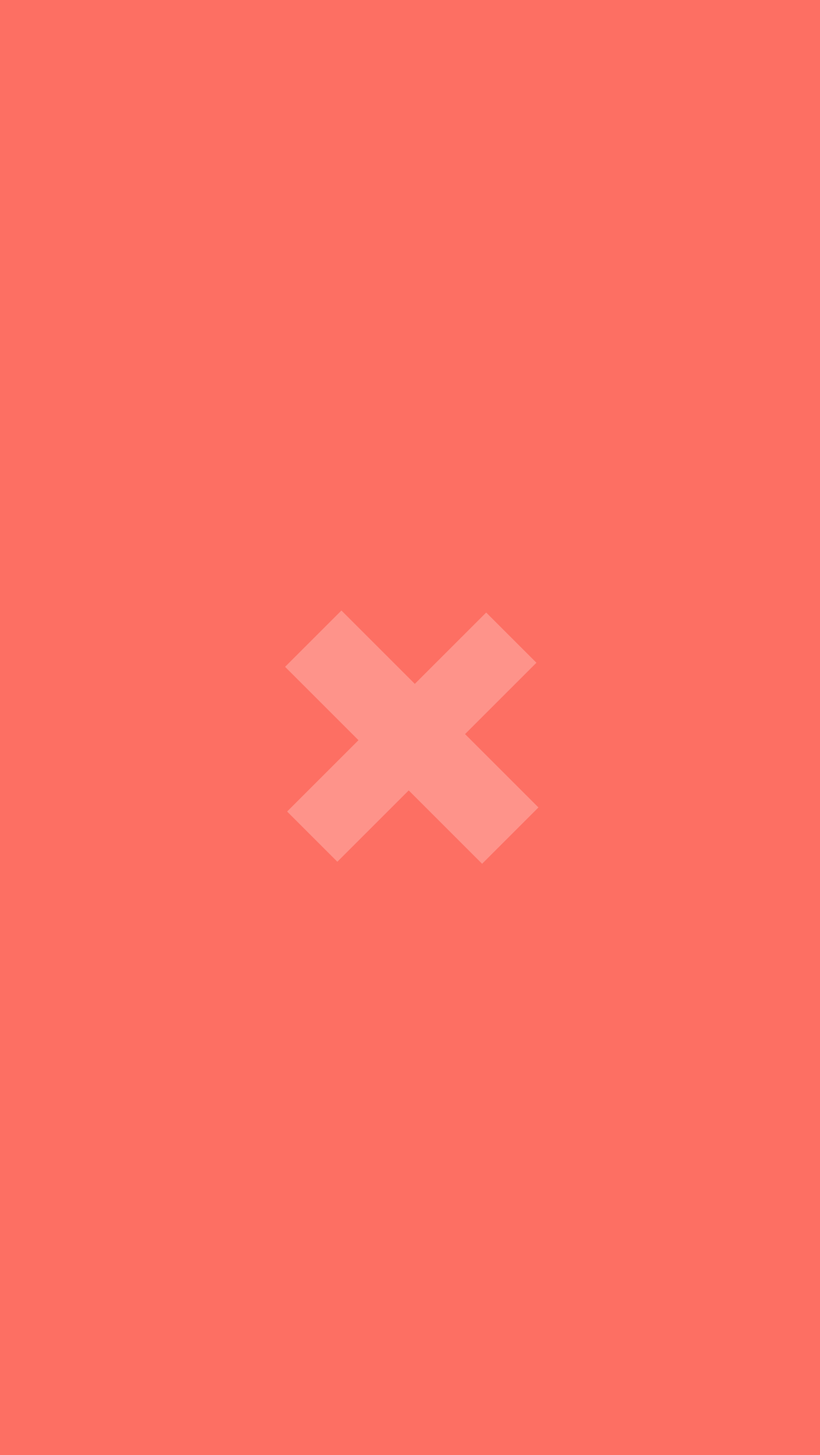
<style>
.page{position:relative;width:820px;height:1455px;background:#fd6f63}
.page>*{position:absolute;margin:0}
.t1{font:576.3px "Montserrat-Bold";letter-spacing:0.1em;color:#fe938a}
</style>
<div class="page">
<p class="t1" style="left:285px;top:610px;width:254px;height:254px;rotate:-45deg">+</p>
</div>
